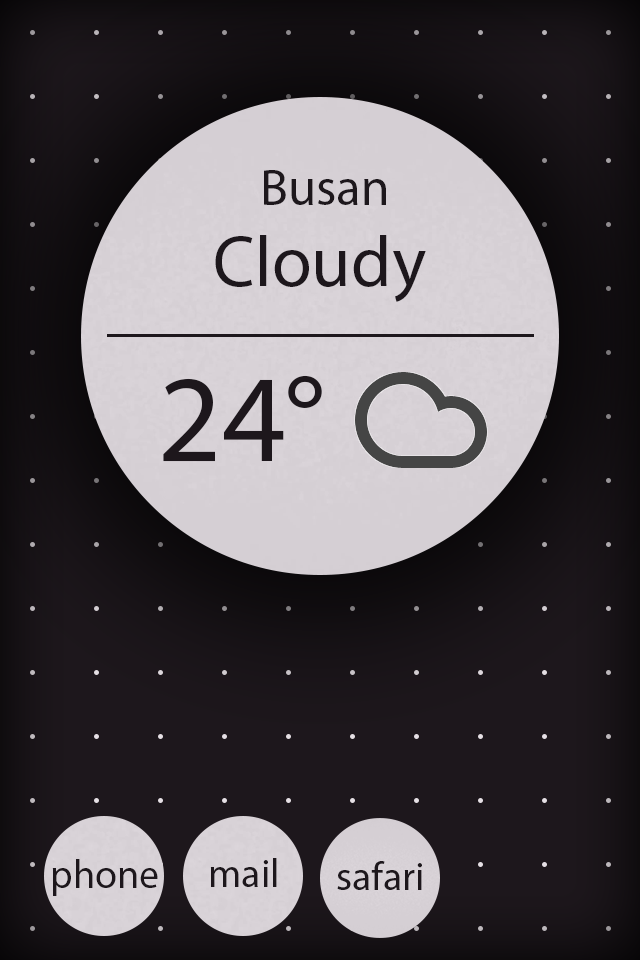
<style>
.page{position:relative;width:640px;height:960px}
.page>*{position:absolute;margin:0}
.t1{font:51.5px "AppleGothic";color:#1d171c}
.t2{font:72px "AppleGothic";color:#1d171c}
.t3{font:125.1px "AppleGothic";color:#1d171c}
.t4{font:39.6px "MyriadPro-Regular";color:#1d171c}
</style>
<div class="page">
<p class="t1" style="left:264px;top:170px;width:122px;height:35px">Busan</p>
<p class="t2" style="left:215px;top:235px;width:211px;height:67px">Cloudy</p>
<p class="t3" style="left:163px;top:375px;width:159px;height:87px">24°</p>
<p class="t4" style="left:52px;top:859px;width:106px;height:37px">phone</p>
<p class="t4" style="left:210px;top:858px;width:67px;height:29px">mail</p>
<p class="t4" style="left:337px;top:861px;width:85px;height:29px">safari</p>
</div>
